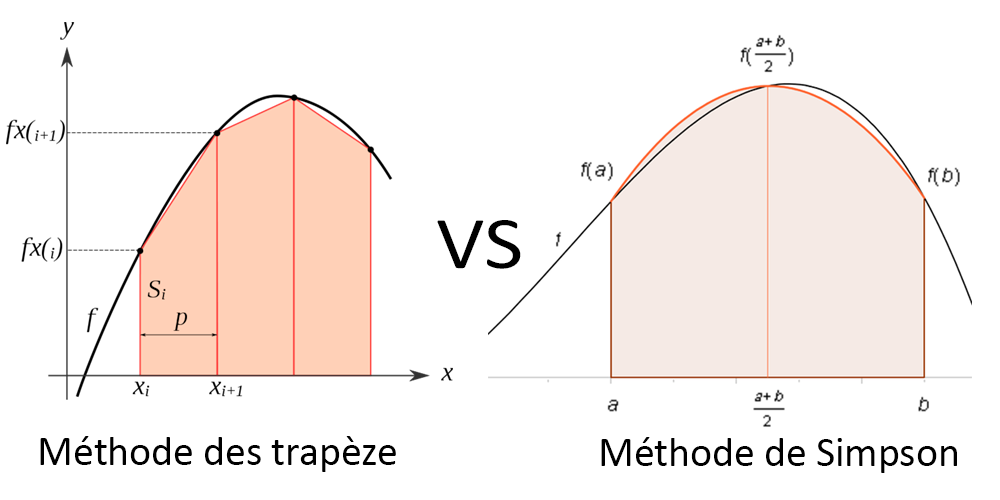
<style>
.page{position:relative;width:1000px;height:500px;background:#ffffff}
.page>*{position:absolute;margin:0}
.t1{font:74.9px "Calibri";color:#000000;scale:1.14 1}
.t2{font:41.6px "Calibri";color:#000000}
</style>
<div class="page">
<p class="t1" style="left:437px;top:220px;width:84px;height:49px">VS</p>
<p class="t2" style="left:40px;top:436px;width:356px;height:36px">Méthode des trapèze</p>
<p class="t2" style="left:601px;top:437px;width:356px;height:36px">Méthode de Simpson</p>
</div>
